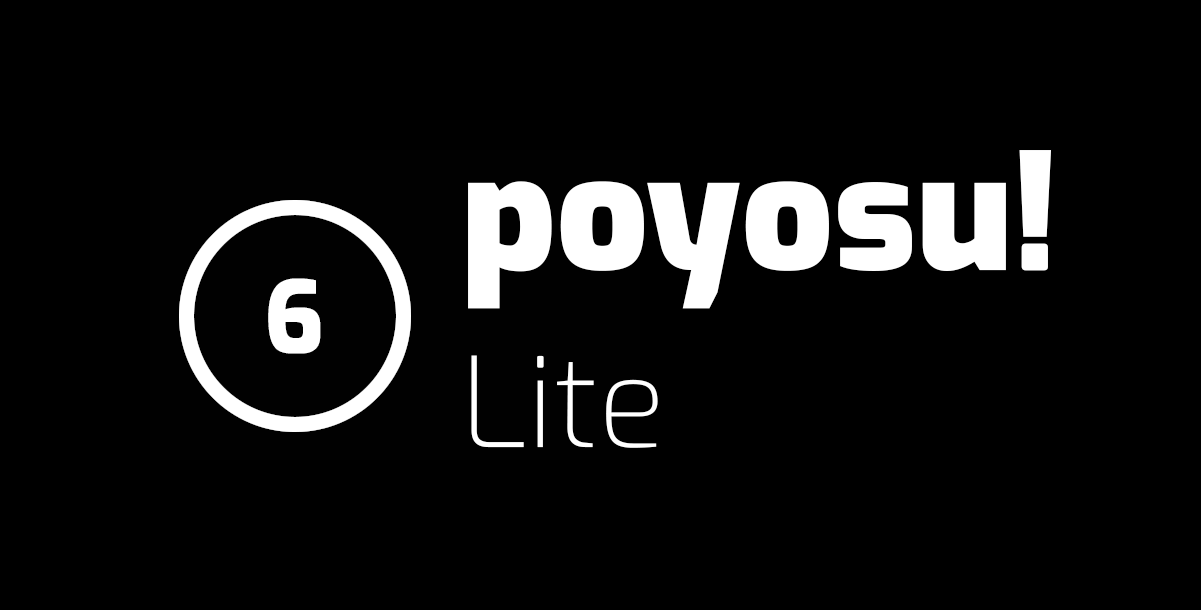
<style>
.page{position:relative;width:1201px;height:610px;background:#000000}
.page>*{position:absolute;margin:0}
.t1{font:161.6px "Exo-Black";color:#ffffff}
.t2{font:99.8px "Exo-ExtraBold";color:#ffffff}
.t3{font:124.7px "Exo-ExtraLight";color:#ffffff}
</style>
<div class="page">
<p class="t1" style="left:468px;top:150px;width:583px;height:159px">poyosu!</p>
<p class="t2" style="left:268px;top:278px;width:53px;height:76px">6</p>
<p class="t3" style="left:471px;top:355px;width:187px;height:93px">Lite</p>
</div>
